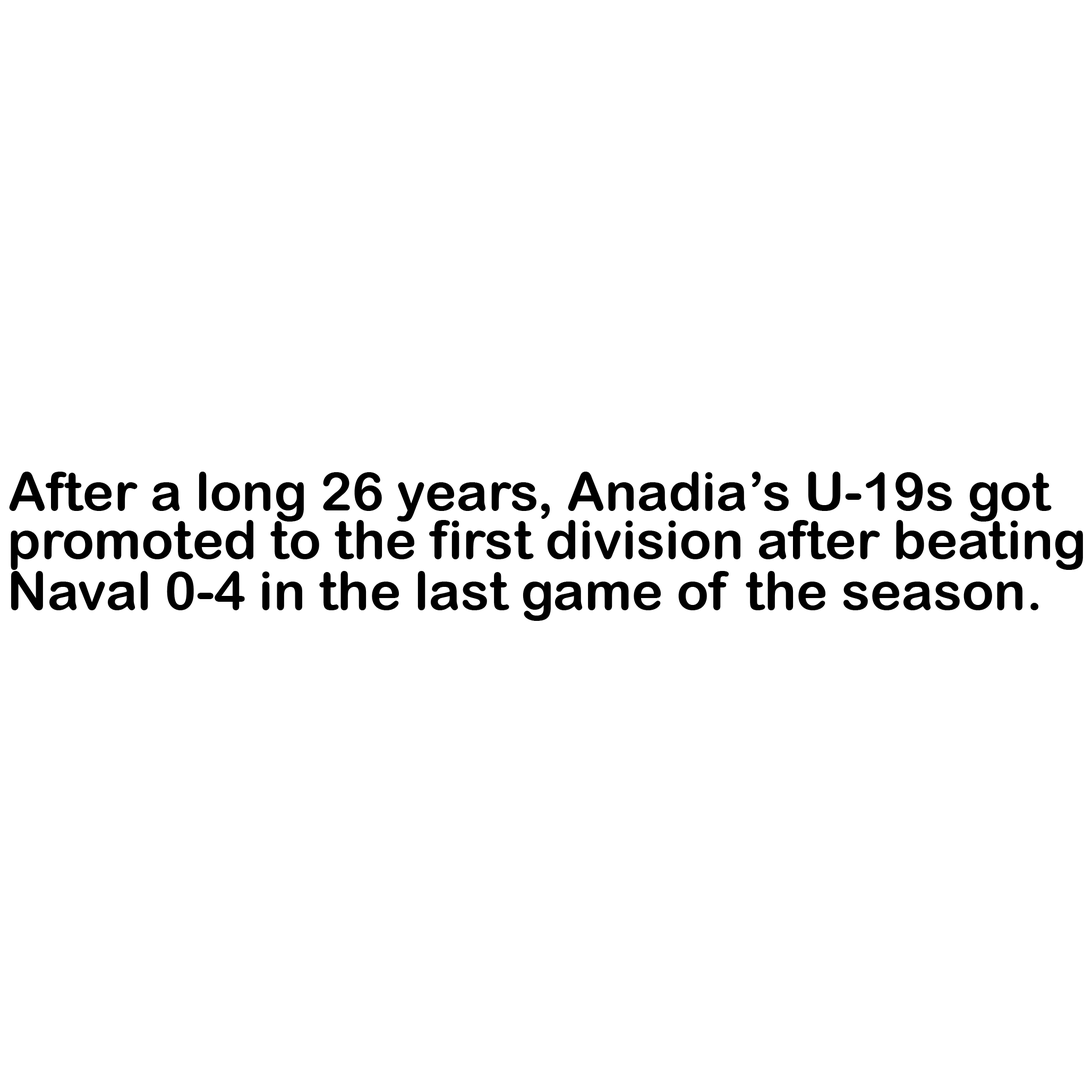
<style>
.page{position:relative;width:1092px;height:1092px;background:#ffffff}
.page>*{position:absolute;margin:0}
.t1{font:53.1px "ArialRoundedMTBold";color:#000000}
</style>
<div class="page">
<p class="t1" style="left:9px;top:472px;width:1043px;height:50px">After a long 26 years, Anadia’s U-19s got</p>
<p class="t1" style="left:11px;top:520px;width:1072px;height:50px">promoted to the first division after beating</p>
<p class="t1" style="left:11px;top:571px;width:1027px;height:50px">Naval 0-4 in the last game of the season.</p>
</div>
